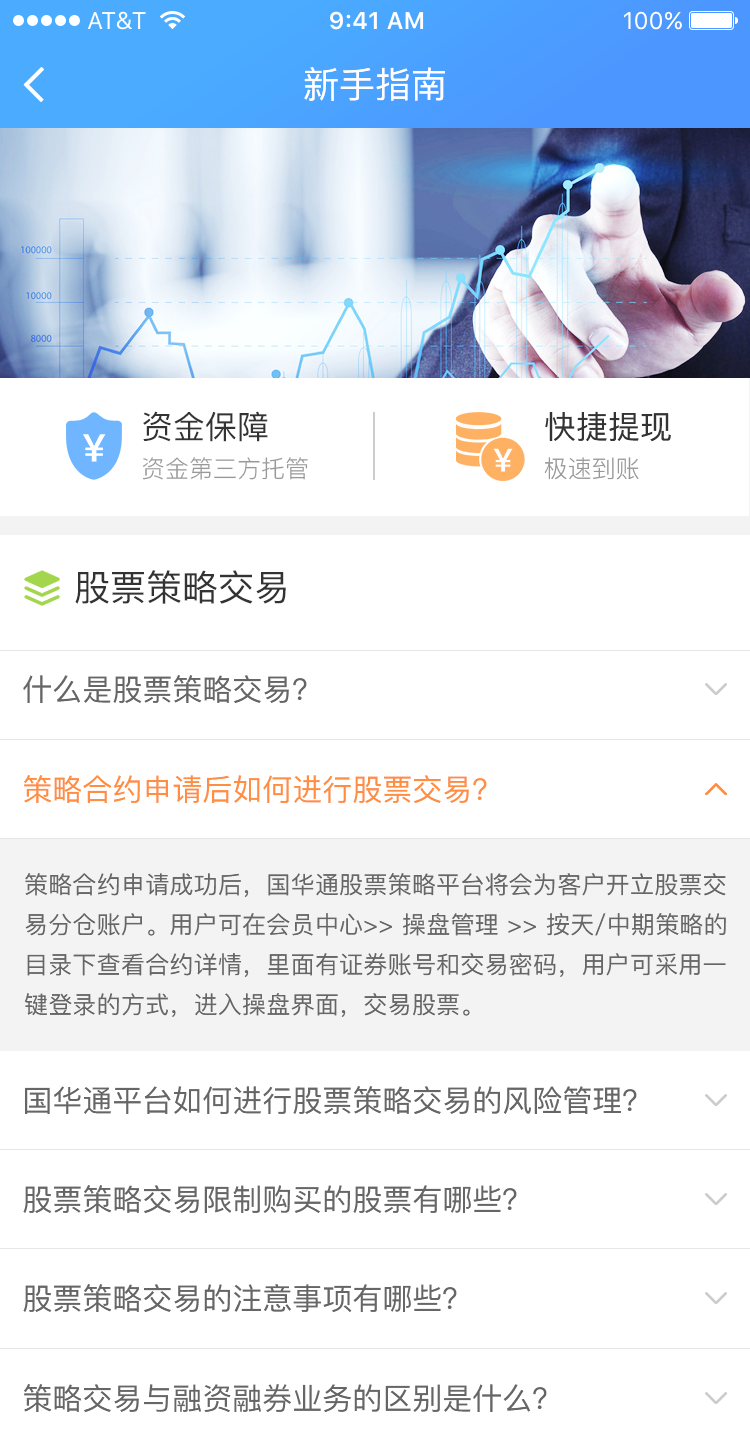
<style>
.page{position:relative;width:750px;height:1447px;background:#ffffff}
.page>*{position:absolute;margin:0}
.t1{font:36px "PingFang-SC-Medium";color:#ffffff}
.t2{font:32px "PingFang-SC-Medium";color:#333333}
.t3{font:24px "PingFang-SC-Regular";color:#999999}
.t4{font:36px "PingFang-SC-Medium";color:#333333}
.t5{font:30px "PingFang-SC-Medium";color:#666666}
.t6{font:30px "PingFang-SC-Medium";color:#ff8e42}
.t7{font:24px/40px "PingFang-SC-Medium";letter-spacing:0.01em;color:#666666}
</style>
<div class="page">
<p class="t1" style="left:304px;top:67px;width:141px;height:34px">新手指南</p>
<p class="t2" style="left:143px;top:411px;width:125px;height:31px">资金保障</p>
<p class="t2" style="left:545px;top:411px;width:126px;height:31px">快捷提现</p>
<p class="t3" style="left:142px;top:457px;width:166px;height:23px">资金第三方托管</p>
<p class="t3" style="left:544px;top:457px;width:95px;height:23px">极速到账</p>
<p class="t4" style="left:75px;top:570px;width:211px;height:34px">股票策略交易</p>
<p class="t5" style="left:23px;top:675px;width:284px;height:28px">什么是股票策略交易？</p>
<p class="t6" style="left:24px;top:775px;width:463px;height:28px">策略合约申请后如何进行股票交易？</p>
<p class="t7" style="left:24px;top:873px;width:702px;height:144px">策略合约申请成功后，国华通股票策略平台将会为客户开立股票交易分仓账户。用户可在会员中心&gt;&gt; 操盘管理 &gt;&gt; 按天/中期策略的目录下查看合约详情，里面有证券账号和交易密码，用户可采用一键登录的方式，进入操盘界面，交易股票。</p>
<p class="t5" style="left:25px;top:1086px;width:612px;height:28px">国华通平台如何进行股票策略交易的风险管理？</p>
<p class="t5" style="left:23px;top:1185px;width:494px;height:28px">股票策略交易限制购买的股票有哪些？</p>
<p class="t5" style="left:23px;top:1284px;width:434px;height:28px">股票策略交易的注意事项有哪些？</p>
<p class="t5" style="left:24px;top:1384px;width:523px;height:28px">策略交易与融资融券业务的区别是什么？</p>
</div>
